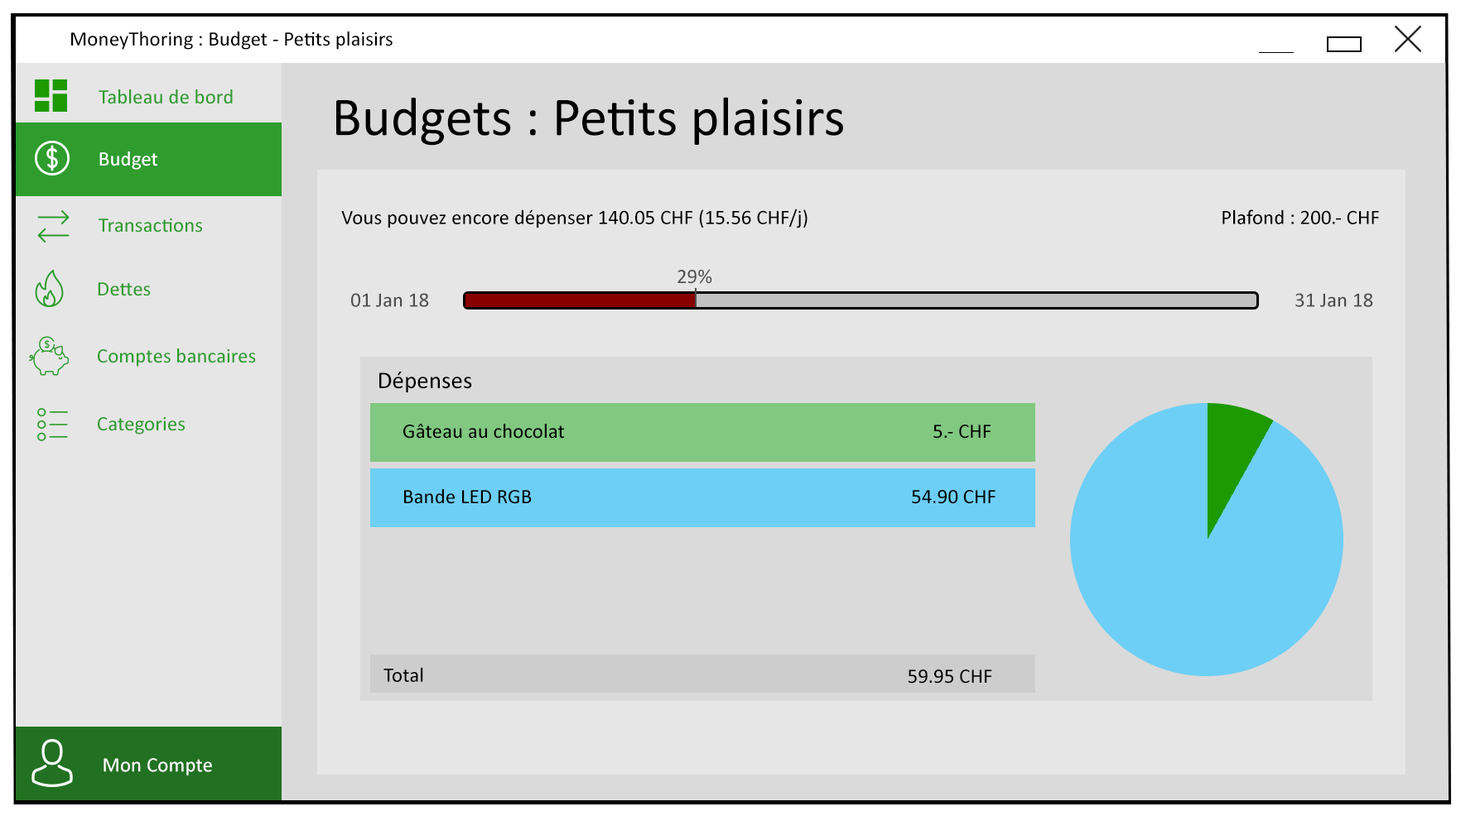
<style>
.page{position:relative;width:1461px;height:816px;background:#e6e6e6}
.page>*{position:absolute;margin:0}
.t1{font:20.7px "Calibri";color:#010101}
.t2{font:20.7px "Calibri";color:#2e9d2e}
.t3{font:55.2px "Calibri";color:#000000}
.t4{font:20.7px "Calibri";color:#ffffff}
.t5{font:20.7px "Calibri";color:#000000}
.t6{font:20.6px "Calibri";color:#4d4d4d}
.t7{font:20.7px "Calibri";color:#4d4d4d}
.t8{font:24.1px "Calibri";color:#000000}
</style>
<div class="page">
<p class="t1" style="left:71px;top:31px;width:321px;height:19px">MoneyThoring : Budget - Petits plaisirs</p>
<p class="t2" style="left:99px;top:89px;width:134px;height:15px">Tableau de bord</p>
<p class="t3" style="left:336px;top:97px;width:507px;height:49px">Budgets : Petits plaisirs</p>
<p class="t4" style="left:99px;top:152px;width:58px;height:18px">Budget</p>
<p class="t5" style="left:341px;top:209px;width:466px;height:20px">Vous pouvez encore dépenser 140.05 CHF (15.56 CHF/j)</p>
<p class="t5" style="left:1222px;top:209px;width:157px;height:15px">Plafond : 200.- CHF</p>
<p class="t2" style="left:99px;top:218px;width:103px;height:15px">Transactions</p>
<p class="t6" style="left:677px;top:269px;width:35px;height:15px">29%</p>
<p class="t2" style="left:98px;top:282px;width:53px;height:14px">Dettes</p>
<p class="t7" style="left:351px;top:293px;width:78px;height:14px">01 Jan 18</p>
<p class="t7" style="left:1295px;top:293px;width:78px;height:14px">31 Jan 18</p>
<p class="t2" style="left:98px;top:349px;width:158px;height:18px">Comptes bancaires</p>
<p class="t8" style="left:379px;top:372px;width:93px;height:21px">Dépenses</p>
<p class="t2" style="left:98px;top:417px;width:87px;height:18px">Categories</p>
<p class="t5" style="left:403px;top:424px;width:161px;height:15px">Gâteau au chocolat</p>
<p class="t5" style="left:933px;top:425px;width:57px;height:14px">5.- CHF</p>
<p class="t5" style="left:404px;top:489px;width:128px;height:15px">Bande LED RGB</p>
<p class="t5" style="left:912px;top:490px;width:83px;height:14px">54.90 CHF</p>
<p class="t5" style="left:383px;top:667px;width:40px;height:15px">Total</p>
<p class="t5" style="left:907px;top:670px;width:85px;height:14px">59.95 CHF</p>
<p class="t4" style="left:103px;top:758px;width:109px;height:18px">Mon Compte</p>
</div>
